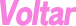
<style>
.page{position:relative;width:76px;height:26px;background:#f880de}
.page>*{position:absolute;margin:0}
.t1{font:32px "RodinPro-EB";letter-spacing:-0.054em;color:#f880de;font-style:italic;scale:0.84 1}
</style>
<div class="page">
<p class="t1" style="left:0px;top:0px;width:76px;height:26px">Voltar</p>
</div>
